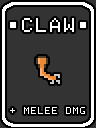
<style>
.page{position:relative;width:96px;height:128px;background:#333333}
.page>*{position:absolute;margin:0}
.t1{font:16px "PrintChar21";color:#fefefe;text-transform:uppercase}
.t2{font:8px "PrintChar21";color:#fefefe;text-transform:uppercase}
</style>
<div class="page">
<p class="t1" style="left:10px;top:18px;width:76px;height:14px">•CLAW•</p>
<p class="t2" style="left:10px;top:107px;width:75px;height:7px">+ MELEE DMG</p>
</div>
